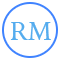
<style>
.page{position:relative;width:60px;height:60px;background:#ffffff}
.page>*{position:absolute;margin:0}
.t1{font:26px "IowanOldStyle-Roman";color:#55acee}
</style>
<div class="page">
<p class="t1" style="left:10px;top:22px;width:41px;height:18px">RM</p>
</div>
